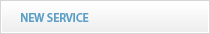
<style>
.page{position:relative;width:210px;height:34px}
.page>*{position:absolute;margin:0}
.t1{font:12px "MyriadPro-Semibold";letter-spacing:-0.01em;color:#5ca0c7;text-transform:uppercase}
</style>
<div class="page">
<p class="t1" style="left:21px;top:13px;width:68px;height:9px">New service</p>
</div>
